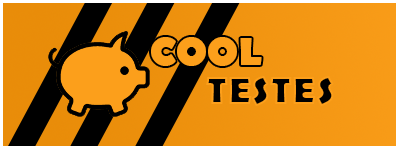
<style>
.page{position:relative;width:400px;height:150px}
.page>*{position:absolute;margin:0}
.t1{font:40px "BerlinSansFB-Bold";color:#fc9f1b}
.t2{font:40px "BerlinSansFB-Bold"}
</style>
<div class="page">
<p class="t1" style="left:151px;top:37px;width:111px;height:29px">COOL</p>
<p class="t2" style="left:206px;top:76px;width:128px;height:30px">TESTES</p>
</div>
